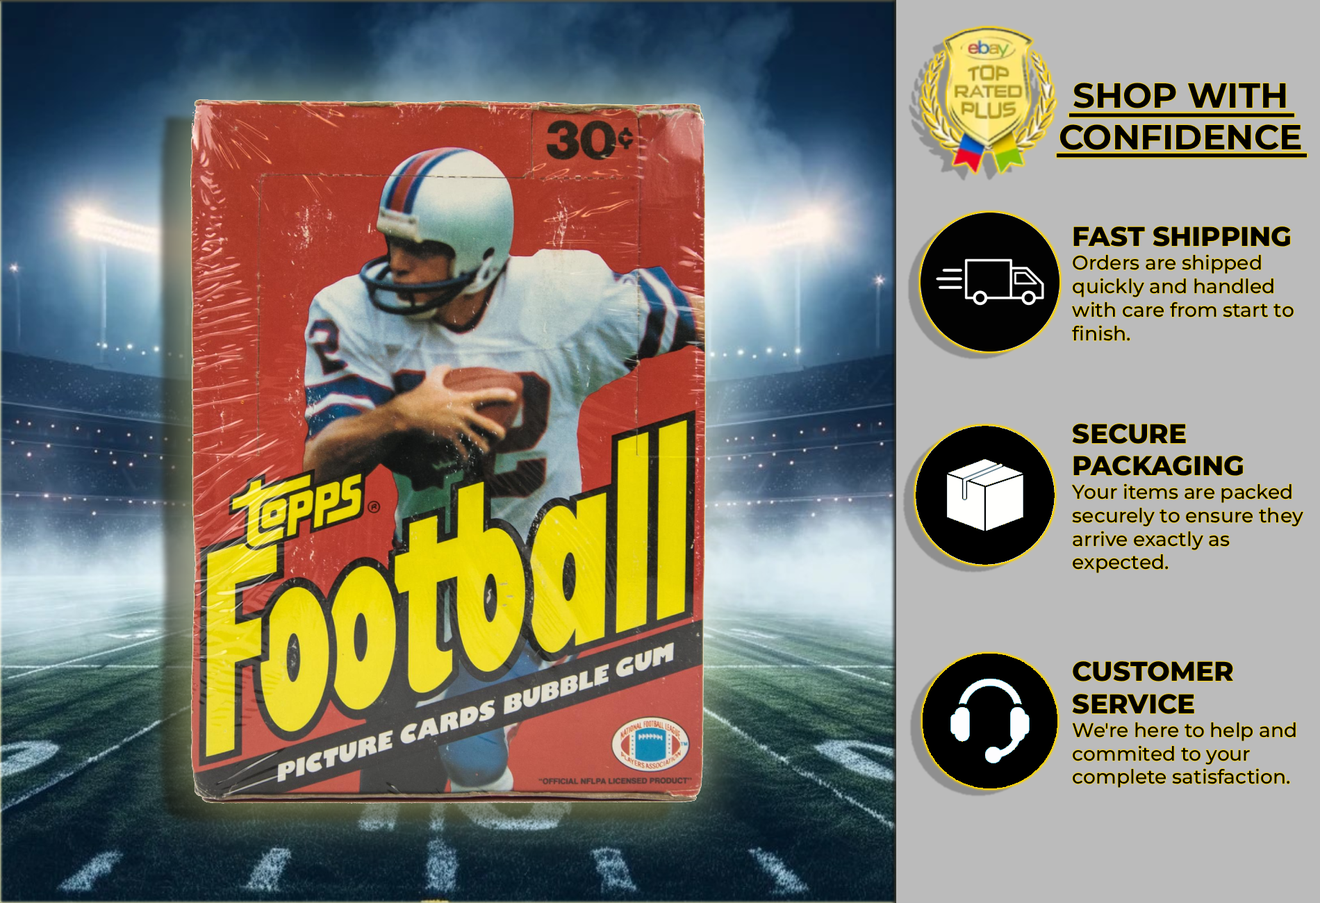
<style>
.page{position:relative;width:1320px;height:903px}
.page>*{position:absolute;margin:0}
.t1{font:34.7px "Montserrat-Bold";color:#000000}
.t2{font:19.6px "Montserrat-Medium";color:#000000}
.t3{font:27px "Montserrat-Bold";color:#000000}
.t4{font:27px "Montserrat-ExtraBold";color:#000000}
</style>
<div class="page">
<p class="t1" style="left:1060px;top:83px;width:241px;height:67px;text-align:center">SHOP WITH CONFIDENCE</p>
<p class="t2" style="left:1071px;top:227px;width:232px;height:561px"><span class="t3"><br></span><span class="t4">FAST SHIPPING<br></span>Orders are shipped quickly and handled with care from start to finish.<br><br><br><br><span class="t4">SECURE PACKAGING<br></span>Your items are packed securely to ensure they arrive exactly as expected.<br><br><br><br><span class="t4">CUSTOMER SERVICE</span><br>We're here to help and commited to your complete satisfaction.</p>
</div>
